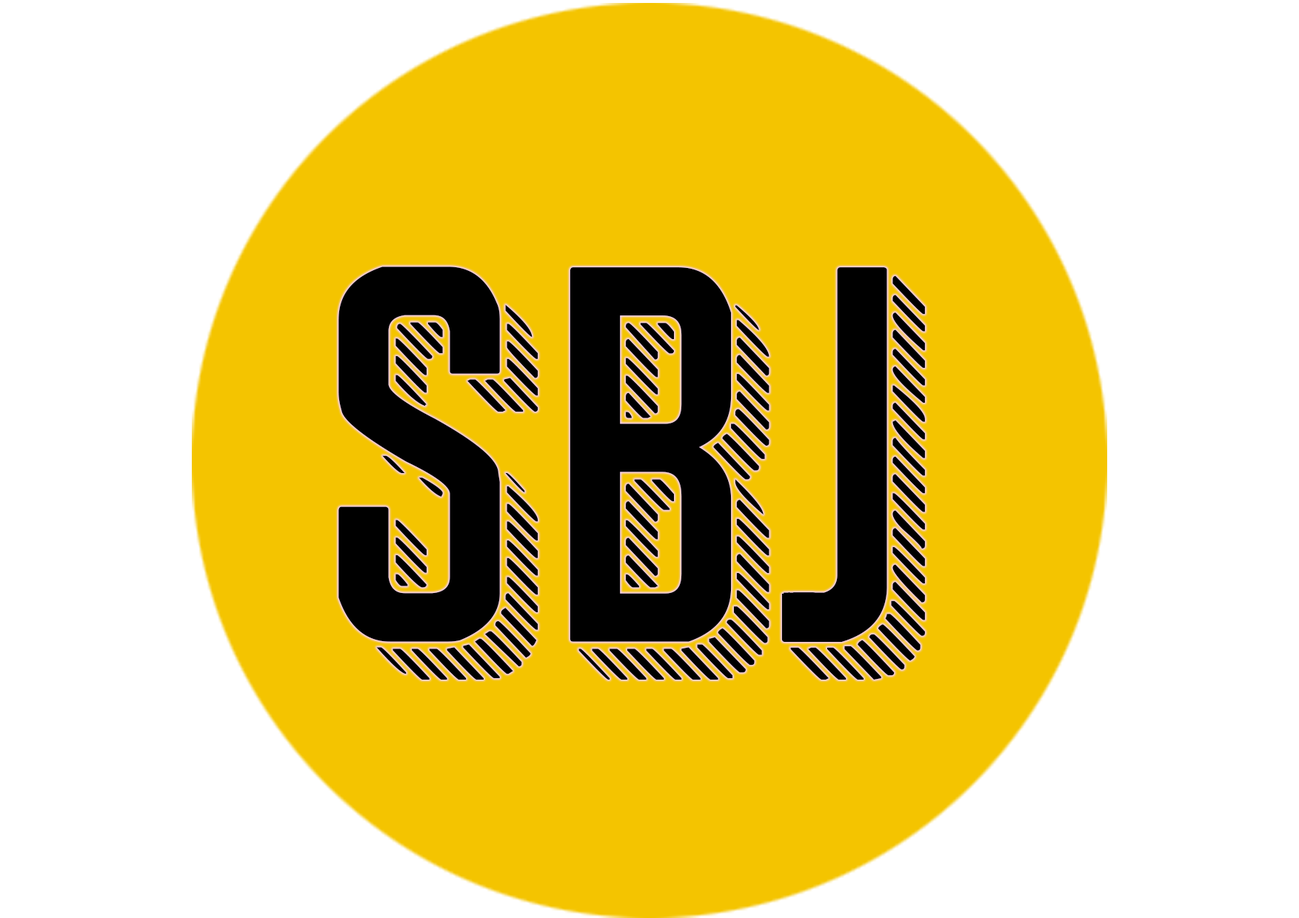
<style>
.page{position:relative;width:1299px;height:918px;background:#ffffff}
.page>*{position:absolute;margin:0}
.t1{font:589.8px "SunsetBoulevard";color:#000000}
</style>
<div class="page">
<p class="t1" style="left:338px;top:267px;width:587px;height:413px">sbj</p>
</div>
